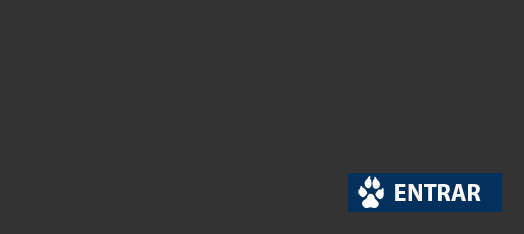
<style>
.page{position:relative;width:524px;height:234px;background:#333333}
.page>*{position:absolute;margin:0}
.t1{font:24px "MyriadPro-Bold";color:#f9f9f9}
</style>
<div class="page">
<p class="t1" style="left:395px;top:184px;width:86px;height:17px">ENTRAR</p>
</div>
